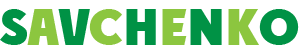
<style>
.page{position:relative;width:300px;height:54px;background:#ffffff}
.page>*{position:absolute;margin:0}
.t1{font:49px "a_PlakatTitul-ExtraBold";color:#009245}
.t2{font:49px "a_PlakatTitul-ExtraBold";color:#8cc63f}
</style>
<div class="page">
<p class="t1" style="left:0px;top:9px;width:299px;height:36px">S<span class="t2">a</span>v<span class="t2">c</span>h<span class="t2">e</span>n<span class="t2">k</span>o</p>
</div>
